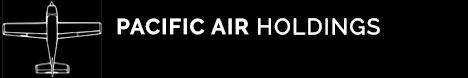
<style>
.page{position:relative;width:468px;height:78px;background:#000000}
.page>*{position:absolute;margin:0}
.t1{font:21.8px "Raleway-Bold";letter-spacing:0.05em;color:#ffffff}
.t2{font:21.8px "Raleway-Regular";letter-spacing:0.05em;color:#ffffff;font-weight:bold}
</style>
<div class="page">
<p class="t1" style="left:117px;top:18px;width:263px;height:17px">PACIFIC AIR <span class="t2">HOLDINGS</span></p>
</div>
